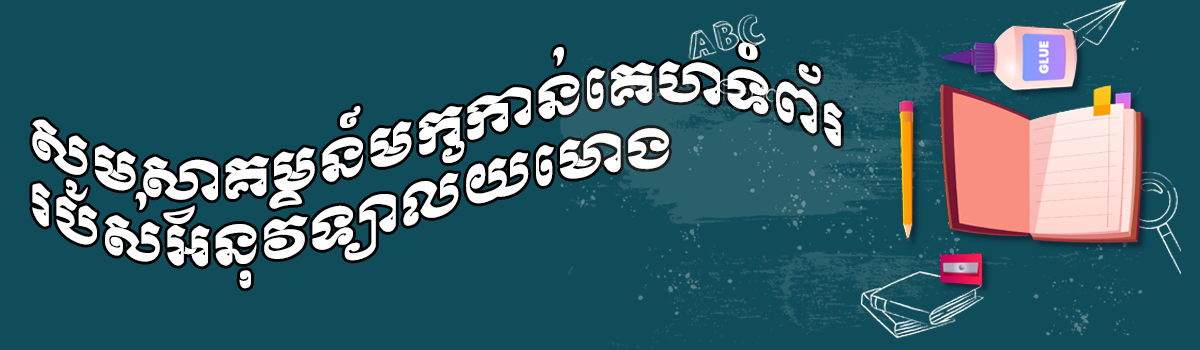
<style>
.page{position:relative;width:1200px;height:350px;background:#104c59}
.page>*{position:absolute;margin:0}
.t1{font:55px "KhmerOSMuolLight";letter-spacing:0.01em;color:#ffffff;text-transform:uppercase}
</style>
<div class="page">
<p class="t1" style="left:32px;top:42px;width:810px;height:247px">សូមស្វាគមន៍មកកាន់គេហទំព័រ<br>របស់អនុវិទ្យាល័យមោង</p>
</div>
